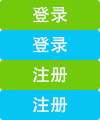
<style>
.page{position:relative;width:100px;height:120px;background:#73c90b}
.page>*{position:absolute;margin:0}
.t1{font:18px "FZHTJW--GB1-0";color:#ffffff}
</style>
<div class="page">
<p class="t1" style="left:32px;top:6px;width:35px;height:17px">登录</p>
<p class="t1" style="left:32px;top:36px;width:35px;height:17px">登录</p>
<p class="t1" style="left:33px;top:66px;width:35px;height:17px">注册</p>
<p class="t1" style="left:33px;top:96px;width:35px;height:17px">注册</p>
</div>
